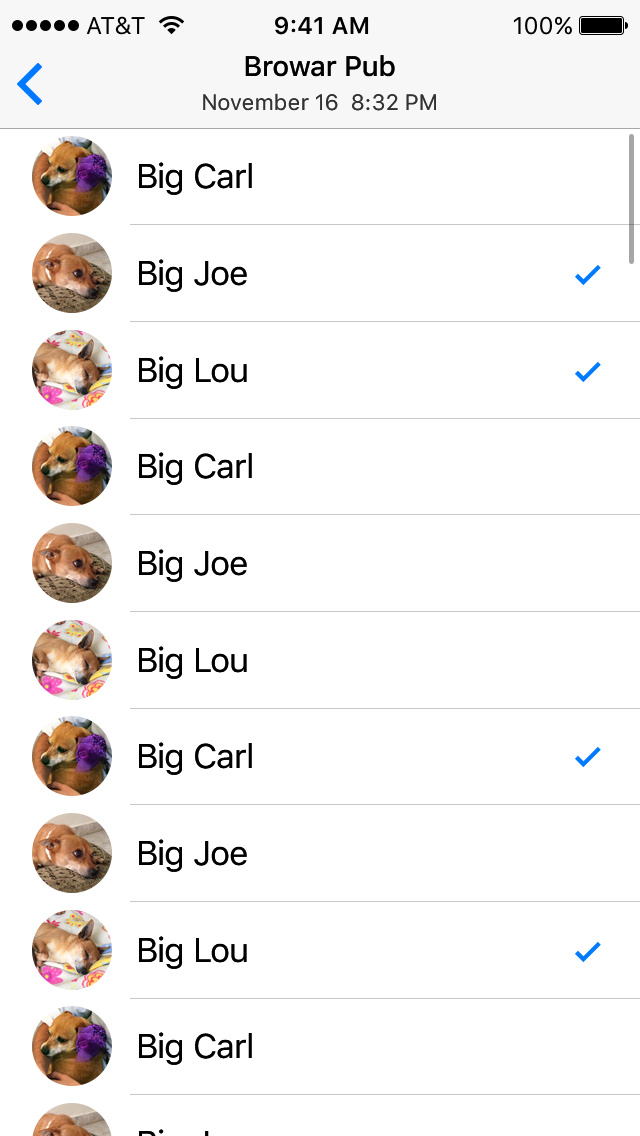
<style>
.page{position:relative;width:640px;height:1136px;background:#ffffff}
.page>*{position:absolute;margin:0}
.t1{font:28px "SFUIText-Medium";letter-spacing:-0.01em;color:#000000}
.t2{font:22px "SFUIText-Regular";color:#333333}
.t3{font:34px "SFUIText-Regular";letter-spacing:-0.03em;color:#000000}
</style>
<div class="page">
<p class="t1" style="left:245px;top:55px;width:150px;height:22px">Browar Pub</p>
<p class="t2" style="left:203px;top:93px;width:233px;height:18px">November 16  8:32 PM</p>
<p class="t3" style="left:139px;top:162px;width:113px;height:33px">Big Carl</p>
<p class="t3" style="left:139px;top:259px;width:108px;height:33px">Big Joe</p>
<p class="t3" style="left:139px;top:356px;width:108px;height:33px">Big Lou</p>
<p class="t3" style="left:139px;top:452px;width:113px;height:33px">Big Carl</p>
<p class="t3" style="left:139px;top:549px;width:108px;height:33px">Big Joe</p>
<p class="t3" style="left:139px;top:646px;width:108px;height:33px">Big Lou</p>
<p class="t3" style="left:139px;top:742px;width:113px;height:33px">Big Carl</p>
<p class="t3" style="left:139px;top:839px;width:108px;height:33px">Big Joe</p>
<p class="t3" style="left:139px;top:936px;width:108px;height:33px">Big Lou</p>
<p class="t3" style="left:139px;top:1032px;width:113px;height:33px">Big Carl</p>
</div>
